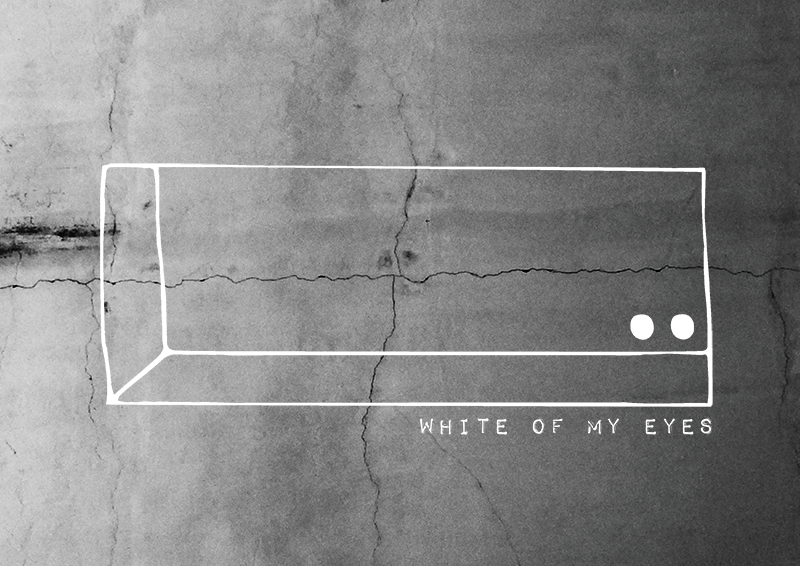
<style>
.page{position:relative;width:800px;height:566px}
.page>*{position:absolute;margin:0}
.t1{font:28.5px "ImpactLabelReversed";letter-spacing:0.05em;color:#ffffff}
</style>
<div class="page">
<p class="t1" style="left:420px;top:417px;width:292px;height:18px">white of my eyes</p>
</div>
